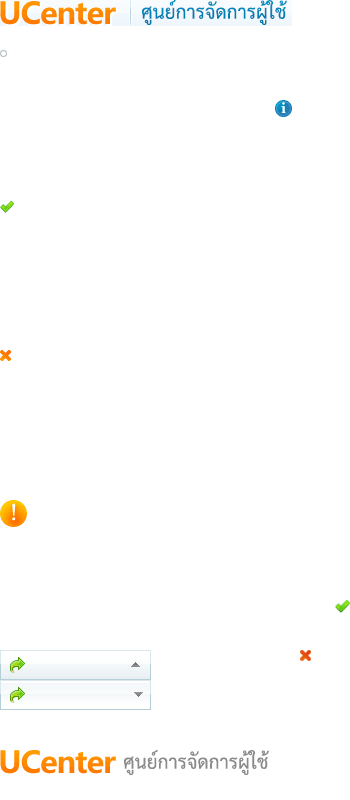
<style>
.page{position:relative;width:350px;height:800px;background:#ffffff}
.page>*{position:absolute;margin:0}
.t1{font:19px "Sarabun-Regular";color:#0282b5}
.t2{font:19px "Sarabun-Regular";color:#8a8a8a}
</style>
<div class="page">
<p class="t1" style="left:142px;top:0px;width:146px;height:25px">ศูนย์การจัดการผู้ใช้</p>
<p class="t2" style="left:124px;top:750px;width:146px;height:25px">ศูนย์การจัดการผู้ใช้</p>
</div>
